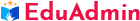
<style>
.page{position:relative;width:140px;height:21px;background:#ffffff}
.page>*{position:absolute;margin:0}
.t1{font:24px "JosefinSans-Bold";color:#ee1044}
</style>
<div class="page">
<p class="t1" style="left:25px;top:1px;width:115px;height:19px">EduAdmin</p>
</div>
